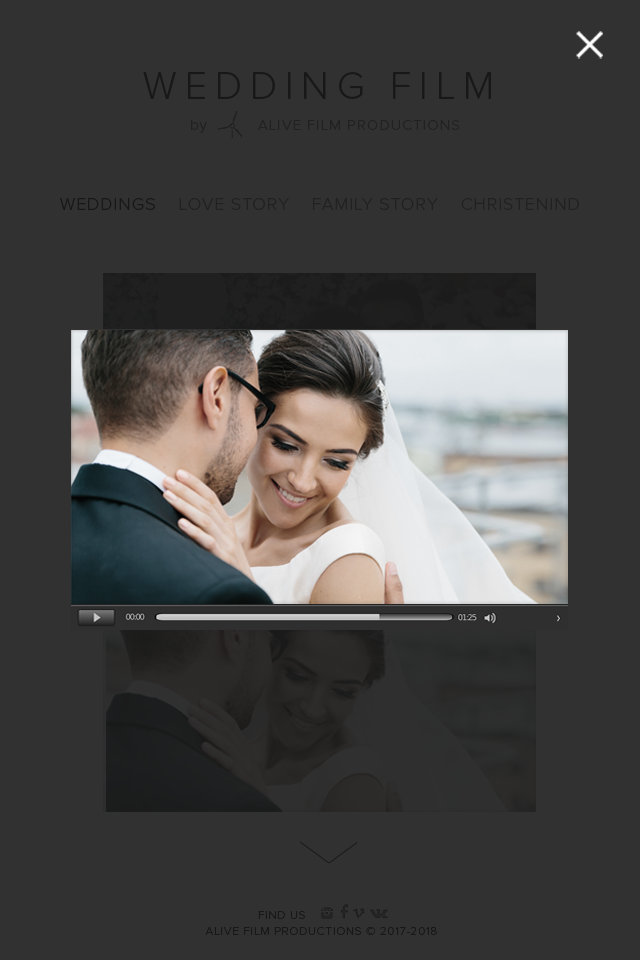
<style>
.page{position:relative;width:640px;height:960px;background:#313131}
.page>*{position:absolute;margin:0}
.t1{font:39.2px "ProximaNova-Light";letter-spacing:0.2em;color:#000000;text-transform:uppercase}
.t2{font:14.9px "ProximaNova-Light";letter-spacing:0.075em;color:#212121}
.t3{font:17.8px "ProximaNova-Light";letter-spacing:0.05em;color:#212121;text-transform:uppercase}
.t4{font:12px "ProximaNova-Light";letter-spacing:0.05em;color:#000000}
.t5{font:12px "Tahoma";letter-spacing:0.05em;color:#000000}
</style>
<div class="page">
<p class="t1" style="left:143px;top:72px;width:348px;height:27px">Wedding FILM</p>
<p class="t2" style="left:191px;top:120px;width:269px;height:13px">by          ALIVE FILM PRODUCTIONS</p>
<p class="t3" style="left:60px;top:198px;width:519px;height:12px">weddings    love story    family story    christenind</p>
<p class="t4" style="left:258px;top:911px;width:47px;height:8px"><span class="t5">      </span>FIND US</p>
<p class="t4" style="left:205px;top:927px;width:232px;height:8px">ALIVE FILM PRODUCTIONS © 2017-2018</p>
</div>
